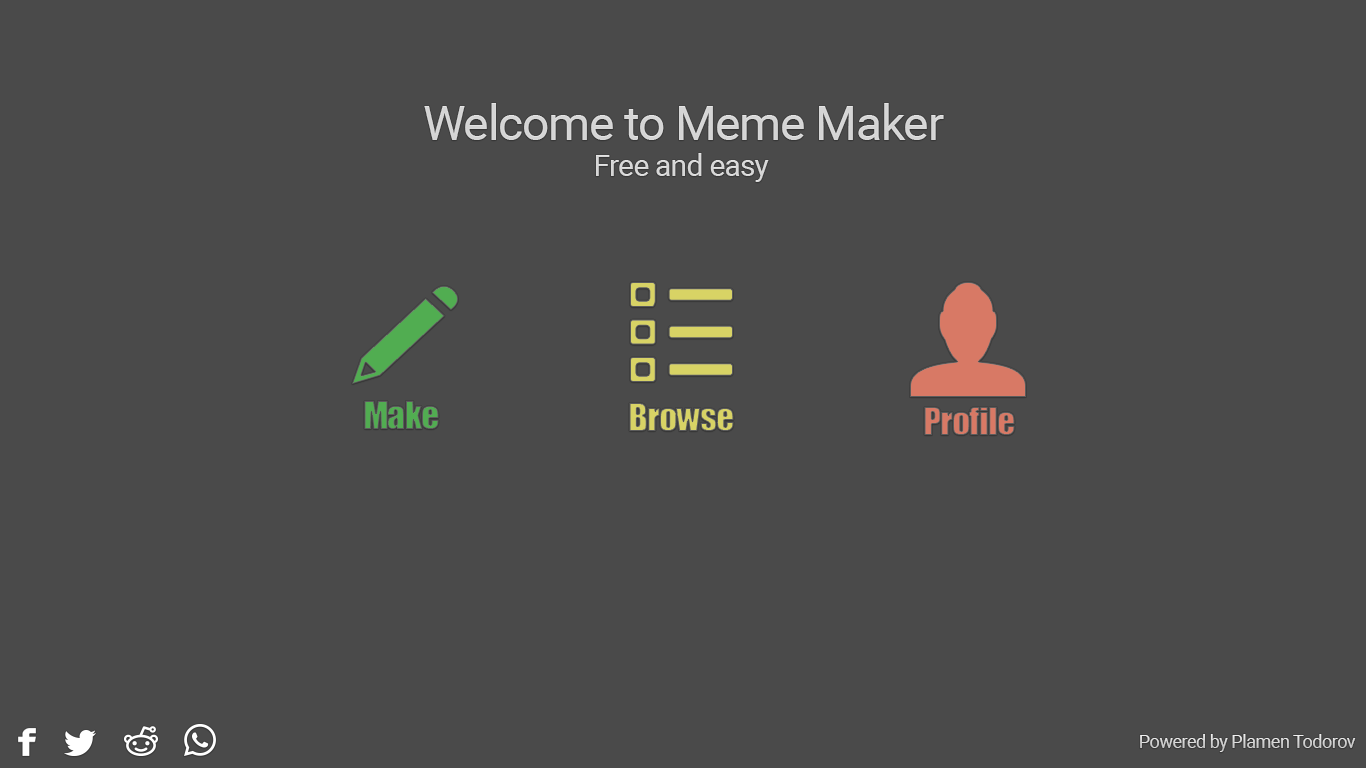
<style>
.page{position:relative;width:1366px;height:768px;background:#4a4a4a}
.page>*{position:absolute;margin:0}
.t1{font:48px "Roboto-Regular";letter-spacing:-0.025em;color:#d6d6d6}
.t2{font:30px "Roboto-Regular";letter-spacing:-0.025em;color:#d8d8d8}
.t3{font:36px "Impact";letter-spacing:-0.025em}
.t4{font:18px "Roboto-Regular";letter-spacing:-0.025em;color:#d7d7d7}
</style>
<div class="page">
<p class="t1" style="left:424px;top:103px;width:520px;height:37px">Welcome to Meme Maker</p>
<p class="t2" style="left:596px;top:153px;width:173px;height:29px">Free and easy</p>
<p class="t3" style="left:364px;top:401px;width:75px;height:28px">Make</p>
<p class="t3" style="left:629px;top:403px;width:105px;height:28px">Browse</p>
<p class="t3" style="left:924px;top:407px;width:91px;height:28px">Profile</p>
<p class="t4" style="left:1140px;top:734px;width:216px;height:18px">Powered by Plamen Todorov</p>
</div>
